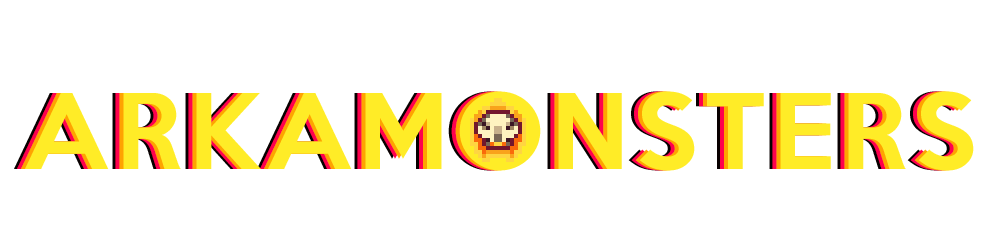
<style>
.page{position:relative;width:1000px;height:250px;background:#ffffff}
.page>*{position:absolute;margin:0}
.t1{font:95px "KeepCalm-Medium";letter-spacing:0.074em}
.t2{font:95px "KeepCalm-Medium";letter-spacing:0.074em;color:#ffec27}
</style>
<div class="page">
<p class="t1" style="left:14px;top:91px;width:949px;height:80px">ARKAMONSTERS</p>
<p class="t1" style="left:17px;top:91px;width:949px;height:80px">ARKAMONSTERS</p>
<p class="t2" style="left:21px;top:91px;width:949px;height:80px">ARKAMONSTERS</p>
<p class="t2" style="left:25px;top:91px;width:949px;height:80px">ARKAMONSTERS</p>
</div>
